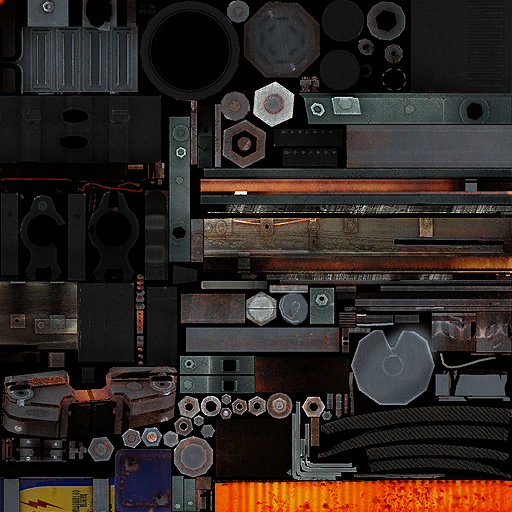
<style>
.page{position:relative;width:512px;height:512px}
.page>*{position:absolute;margin:0}
.t1{font:13.1px/7.5px "ArialMT";color:#100c10;font-weight:bold;scale:0.32 1}
</style>
<div class="page">
<p class="t1" style="left:72px;top:490px;width:18px;height:22px;text-align:center;rotate:90deg">bateria <br>de lanterna</p>
</div>
